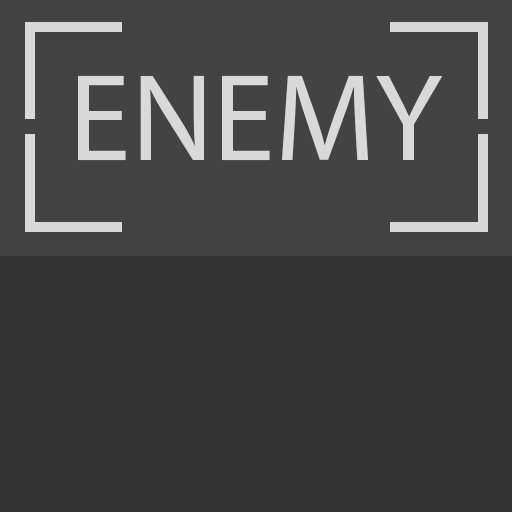
<style>
.page{position:relative;width:512px;height:512px;background:#333333}
.page>*{position:absolute;margin:0}
.t1{font:125px "MyriadPro-Regular";color:#d9d9d9}
</style>
<div class="page">
<p class="t1" style="left:78px;top:75px;width:365px;height:86px">ENEMY</p>
</div>
